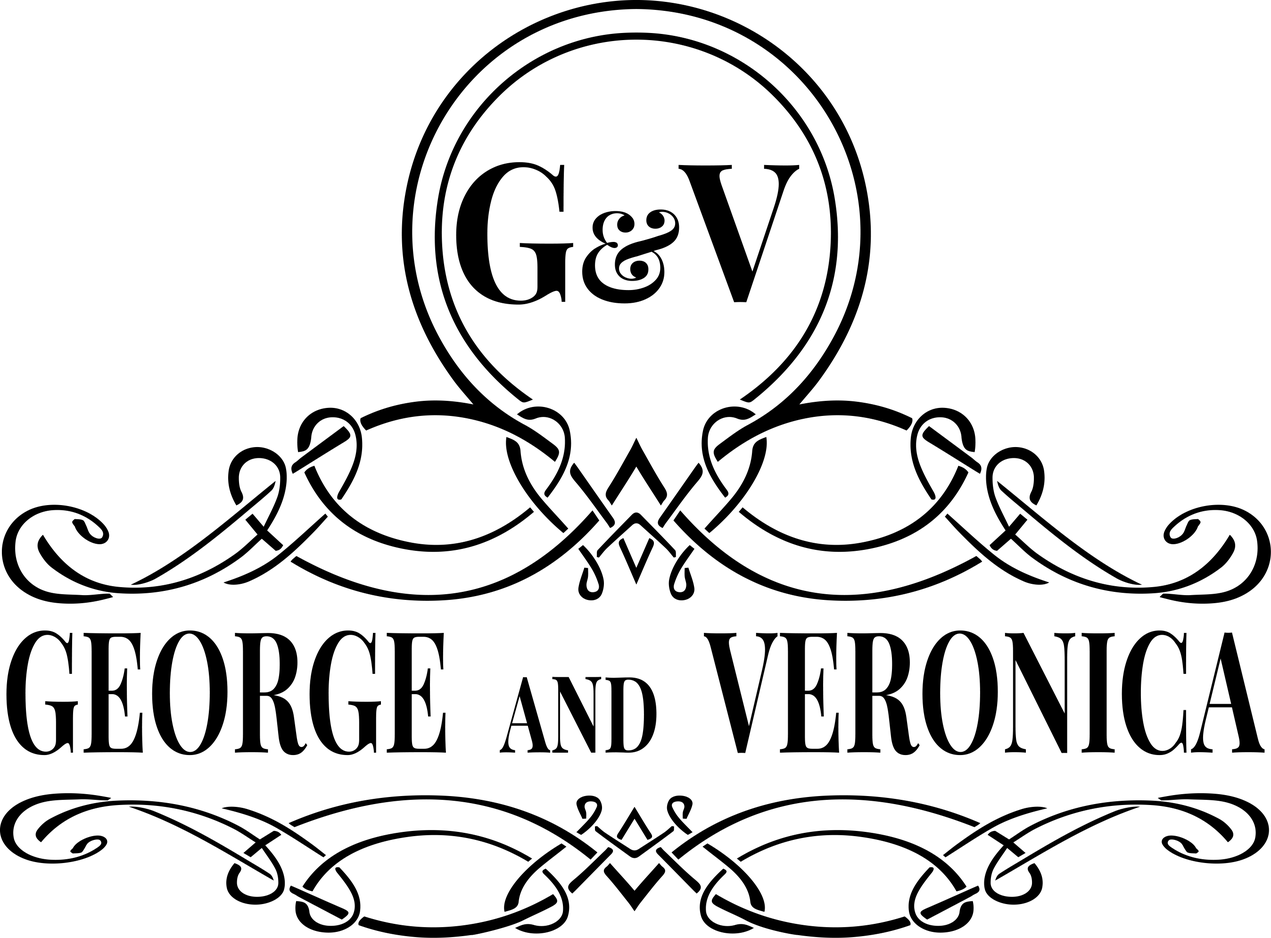
<style>
.page{position:relative;width:1271px;height:938px;background:#ffffff}
.page>*{position:absolute;margin:0}
.t1{font:193.3px "PlayfairDisplaySC-Bold";color:#000000;scale:0.9 1}
.t2{font:127.5px "PlayfairDisplaySC-Bold";color:#000000;scale:0.9 1}
.t3{font:169.2px "PlayfairDisplaySC-Bold";color:#000000;text-transform:uppercase;scale:0.63 1}
.t4{font:123.8px "PlayfairDisplaySC-Bold";color:#000000;font-variant:small-caps;scale:0.63 1}
</style>
<div class="page">
<p class="t1" style="left:456px;top:162px;width:344px;height:143px">G<span class="t2">&amp;</span>V</p>
<p class="t3" style="left:6px;top:630px;width:1259px;height:125px">George  <span class="t4">and</span>  Veronica</p>
</div>
